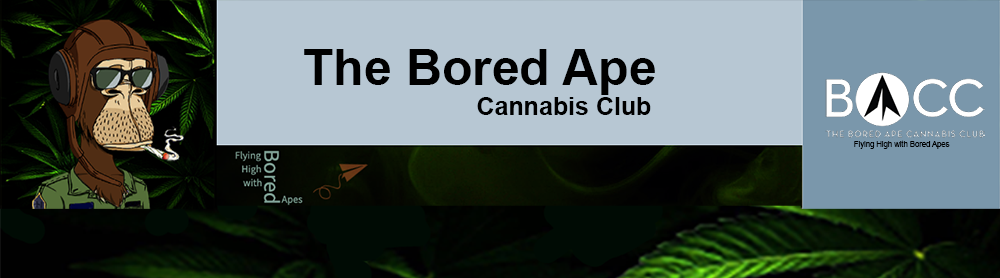
<style>
.page{position:relative;width:1000px;height:278px;background:#b7c7d3}
.page>*{position:absolute;margin:0}
.t1{font:50px "Arial-BoldMT";color:#000000}
.t2{font:25px "Arial-BoldMT";color:#000000}
.t3{font:7.6px "ArialMT";color:#000000}
</style>
<div class="page">
<p class="t1" style="left:304px;top:49px;width:351px;height:66px">The Bored Ape<br><span class="t2">                         Cannabis Club</span></p>
<p class="t3" style="left:854px;top:140px;width:96px;height:9px">Flying High with Bored Apes</p>
</div>
